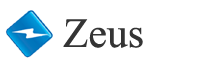
<style>
.page{position:relative;width:200px;height:60px;background:#ffffff}
.page>*{position:absolute;margin:0}
.t1{font:41.7px "TimesNewRomanPSMT";color:#343434}
</style>
<div class="page">
<p class="t1" style="left:63px;top:19px;width:80px;height:29px">Zeus</p>
</div>
